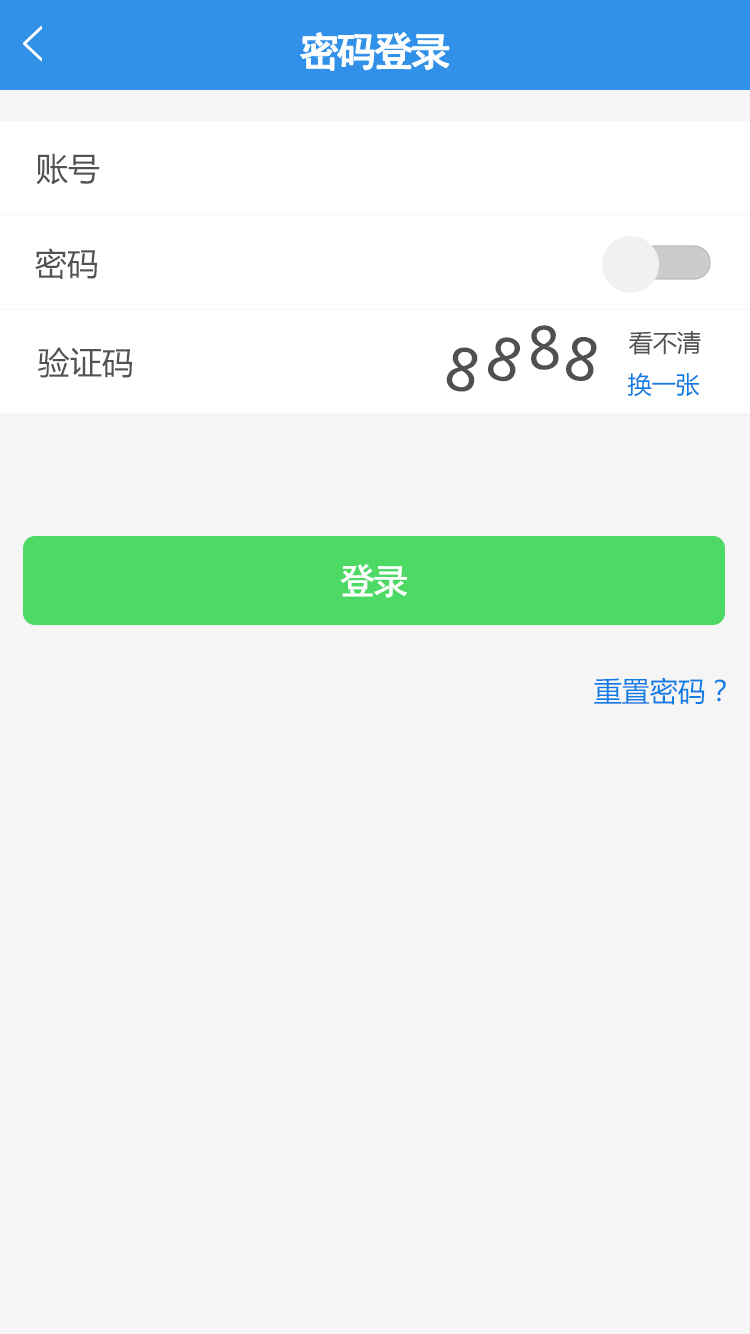
<style>
.page{position:relative;width:750px;height:1334px;background:#f5f5f5}
.page>*{position:absolute;margin:0}
.t1{font:40px "SimHei";letter-spacing:-0.1em;color:#ffffff;font-weight:bold}
.t2{font:32px "MicrosoftYaHei";color:#525252}
.t3{font:56.9px "MicrosoftYaHei";color:#505050}
.t4{font:24px "MicrosoftYaHei";color:#525252}
.t5{font:24px "MicrosoftYaHei";color:#0d7ce4}
.t6{font:36px "SimHei";letter-spacing:-0.1em;color:#ffffff;font-weight:bold}
.t7{font:28px "MicrosoftYaHei";color:#0d7ce4}
</style>
<div class="page">
<p class="t1" style="left:300px;top:32px;width:149px;height:39px">密码登录</p>
<p class="t2" style="left:36px;top:153px;width:64px;height:32px">账号</p>
<p class="t2" style="left:35px;top:248px;width:62px;height:31px">密码</p>
<p class="t3" style="left:531px;top:325px;width:28px;height:45px;rotate:-3deg">8</p>
<p class="t3" style="left:488px;top:337px;width:32px;height:45px;rotate:15deg">8</p>
<p class="t3" style="left:566px;top:337px;width:31px;height:44px;rotate:11deg">8</p>
<p class="t4" style="left:629px;top:331px;width:72px;height:24px">看不清</p>
<p class="t2" style="left:38px;top:347px;width:94px;height:31px">验证码</p>
<p class="t3" style="left:446px;top:347px;width:32px;height:45px;rotate:11deg">8</p>
<p class="t5" style="left:628px;top:373px;width:72px;height:24px">换一张</p>
<p class="t6" style="left:340px;top:563px;width:67px;height:35px">登录</p>
<p class="t7" style="left:594px;top:677px;width:132px;height:28px">重置密码？</p>
</div>
